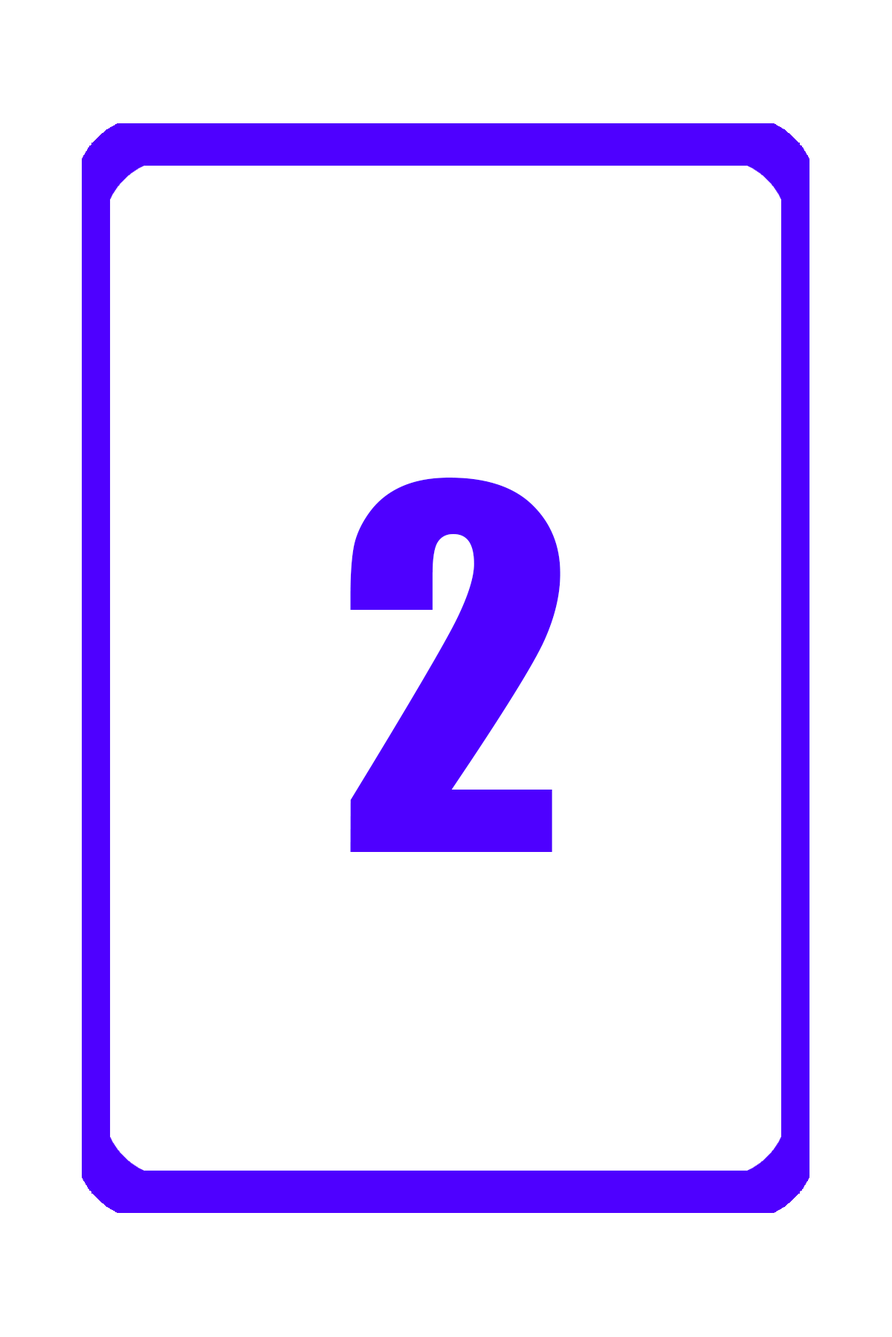
<style>
.page{position:relative;width:892px;height:1337px;background:#ffffff}
.page>*{position:absolute;margin:0}
.t1{font:464.4px "Impact";color:#4e00ff}
</style>
<div class="page">
<p class="t1" style="left:350px;top:478px;width:210px;height:374px">2</p>
</div>
